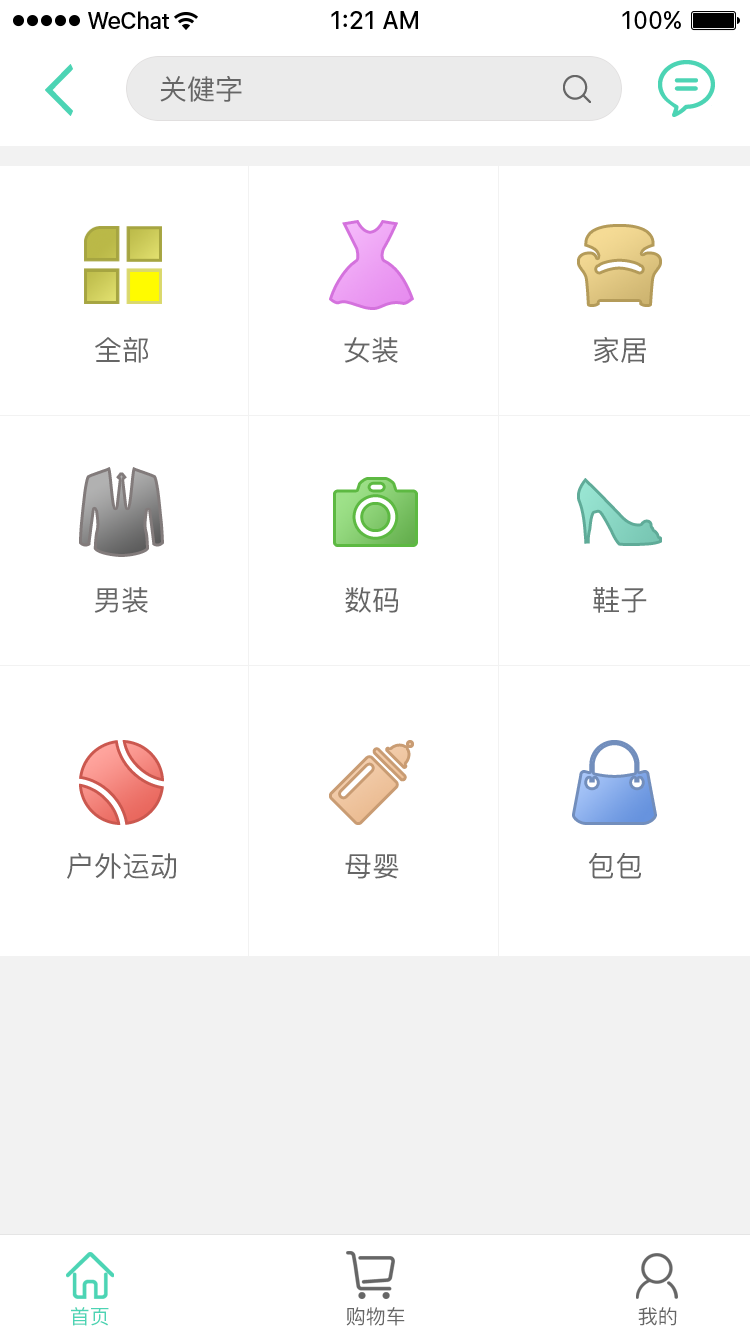
<style>
.page{position:relative;width:750px;height:1334px;background:#ffffff}
.page>*{position:absolute;margin:0}
.t1{font:28px "PingFang-SC-Medium";color:#666666}
.t2{font:20px "PingFang-SC-Medium";color:#4cd4b4}
.t3{font:20px "PingFang-SC-Medium";color:#666666}
</style>
<div class="page">
<p class="t1" style="left:160px;top:76px;width:82px;height:26px">关健字</p>
<p class="t1" style="left:95px;top:337px;width:53px;height:26px">全部</p>
<p class="t1" style="left:344px;top:337px;width:54px;height:26px">女装</p>
<p class="t1" style="left:594px;top:337px;width:52px;height:26px">家居</p>
<p class="t1" style="left:94px;top:587px;width:54px;height:26px">男装</p>
<p class="t1" style="left:345px;top:587px;width:53px;height:26px">数码</p>
<p class="t1" style="left:593px;top:587px;width:54px;height:26px">鞋子</p>
<p class="t1" style="left:67px;top:853px;width:109px;height:26px">户外运动</p>
<p class="t1" style="left:345px;top:854px;width:54px;height:25px">母婴</p>
<p class="t1" style="left:588px;top:853px;width:53px;height:26px">包包</p>
<p class="t2" style="left:71px;top:1307px;width:38px;height:19px">首页</p>
<p class="t3" style="left:346px;top:1307px;width:59px;height:19px">购物车</p>
<p class="t3" style="left:638px;top:1307px;width:39px;height:19px">我的</p>
</div>
